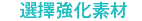
<style>
.page{position:relative;width:142px;height:21px;background:#ffffff}
.page>*{position:absolute;margin:0}
.t1{font:18px "GothicMB101Pr6N-Medium";color:#1dbdc0}
</style>
<div class="page">
<p class="t1" style="left:20px;top:1px;width:107px;height:18px">選擇強化素材</p>
</div>
